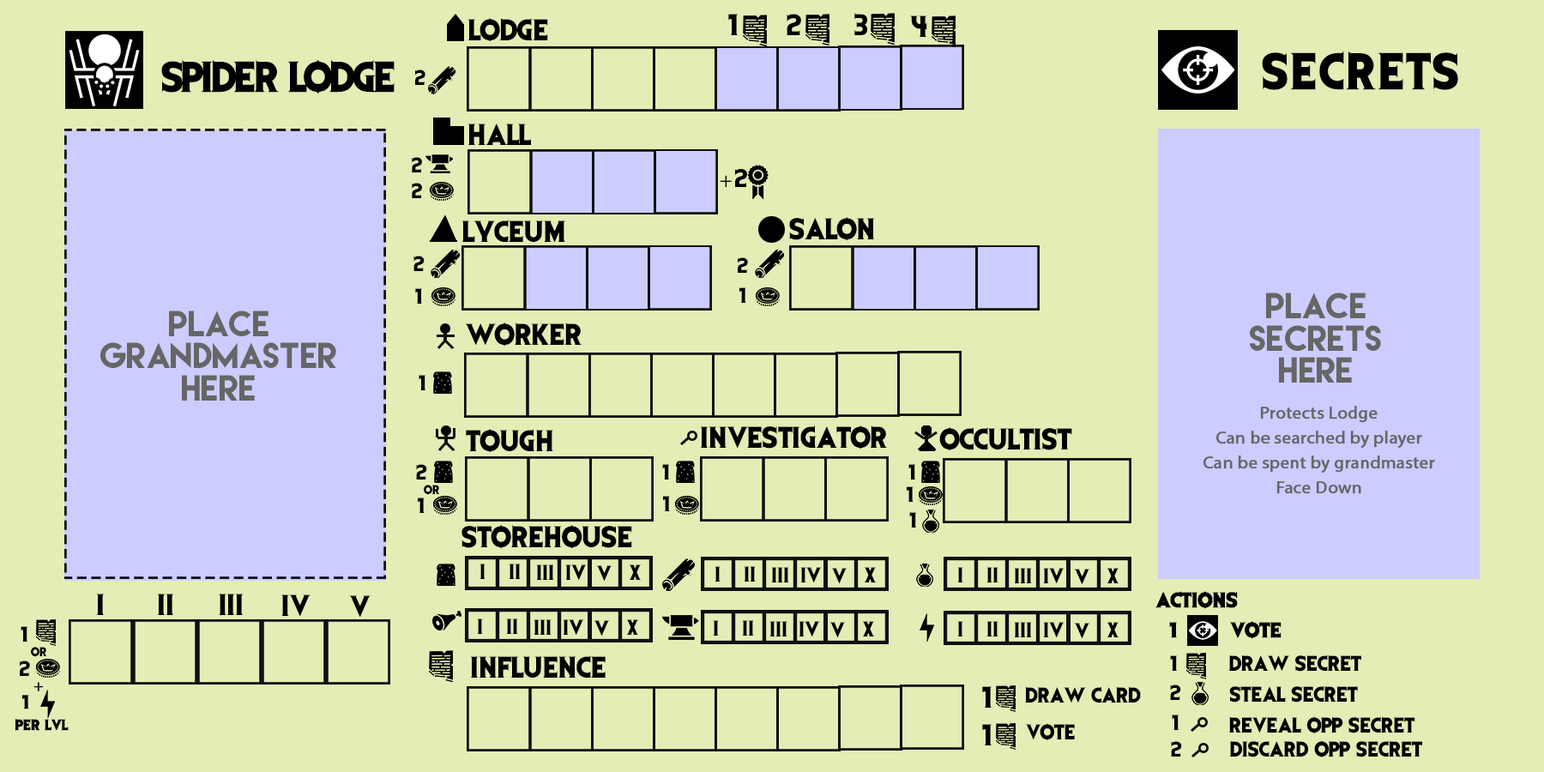
<style>
.page{position:relative;width:1544px;height:772px;background:#e3edb5}
.page>*{position:absolute;margin:0}
.t1{font:25px "EvilDead";color:#000000}
.t2{font:42.9px "EvilDead";letter-spacing:0.05em;color:#000000}
.t3{font:35.7px "EvilDead";letter-spacing:-0.05em;color:#000000}
.t4{font:17.9px "EvilDead";color:#000000}
.t5{font:10.3px/25px "MyriadPro-Regular";color:#000000}
.t6{font:10.3px/25px "EvilDead";color:#000000}
.t7{font:32.2px/32.2px "LemonMilk";color:#666666}
.t8{font:17.9px/25px "MyriadPro-Regular";color:#666666;font-weight:bold}
.t9{font:10.7px "EvilDead";color:#000000}
.t10{font:17.9px "EvilDead";letter-spacing:-0.05em;color:#000000}
.t11{font:17.9px "EvilDead";color:#000000;font-weight:bold}
.t12{font:16.1px "MyriadPro-Regular";color:#000000;font-weight:bold}
.t13{font:16.1px "EvilDead";color:#000000;font-weight:bold}
.t14{font:12.5px "EvilDead";color:#000000;font-weight:bold}
</style>
<div class="page">
<p class="t1" style="left:728px;top:14px;width:11px;height:21px">1</p>
<p class="t1" style="left:787px;top:14px;width:14px;height:21px">2</p>
<p class="t1" style="left:855px;top:13px;width:12px;height:22px">3</p>
<p class="t1" style="left:910px;top:15px;width:17px;height:22px">4</p>
<p class="t1" style="left:468px;top:18px;width:80px;height:24px">LODGE</p>
<p class="t2" style="left:1262px;top:51px;width:197px;height:39px">SECRETS</p>
<p class="t3" style="left:161px;top:59px;width:234px;height:35px">SPIDER LODGE</p>
<p class="t4" style="left:415px;top:69px;width:11px;height:16px">2</p>
<p class="t1" style="left:468px;top:124px;width:63px;height:21px">HALL</p>
<p class="t4" style="left:412px;top:157px;width:10px;height:15px">2</p>
<p class="t5" style="left:720px;top:169px;width:27px;height:18px">+<span class="t6">2</span></p>
<p class="t4" style="left:412px;top:183px;width:10px;height:15px">2</p>
<p class="t1" style="left:462px;top:220px;width:103px;height:22px">LYCEUM</p>
<p class="t1" style="left:789px;top:217px;width:86px;height:24px">SALON</p>
<p class="t4" style="left:414px;top:256px;width:11px;height:15px">2</p>
<p class="t4" style="left:738px;top:257px;width:10px;height:16px">2</p>
<p class="t4" style="left:415px;top:288px;width:7px;height:16px">1</p>
<p class="t4" style="left:740px;top:287px;width:6px;height:16px">1</p>
<p class="t7" style="left:1250px;top:293px;width:131px;height:90px;text-align:center">PLACE<br>SECRETS<br>HERE</p>
<p class="t7" style="left:100px;top:311px;width:236px;height:90px;text-align:center">PLACE<br>GRANDMASTER<br>HERE</p>
<p class="t1" style="left:465px;top:323px;width:118px;height:24px">WORKER</p>
<p class="t4" style="left:419px;top:375px;width:7px;height:15px">1</p>
<p class="t8" style="left:1203px;top:406px;width:232px;height:88px;text-align:center">Protects Lodge<br>Can be searched by player<br>Can be spent by grandmaster<br>Face Down</p>
<p class="t1" style="left:700px;top:426px;width:188px;height:24px">INVESTIGATOR</p>
<p class="t1" style="left:466px;top:429px;width:87px;height:24px">TOUGH</p>
<p class="t1" style="left:939px;top:427px;width:133px;height:24px">OCCULTIST</p>
<p class="t4" style="left:416px;top:464px;width:11px;height:16px">2</p>
<p class="t4" style="left:662px;top:464px;width:8px;height:16px">1</p>
<p class="t4" style="left:909px;top:464px;width:7px;height:16px">1</p>
<p class="t9" style="left:424px;top:484px;width:16px;height:11px">or</p>
<p class="t4" style="left:418px;top:498px;width:7px;height:15px">1</p>
<p class="t4" style="left:663px;top:496px;width:7px;height:15px">1</p>
<p class="t4" style="left:907px;top:486px;width:7px;height:16px">1</p>
<p class="t4" style="left:909px;top:512px;width:8px;height:16px">1</p>
<p class="t1" style="left:462px;top:525px;width:170px;height:24px">STOREHOUSE</p>
<p class="t4" style="left:480px;top:564px;width:6px;height:15px">I</p>
<p class="t4" style="left:509px;top:564px;width:12px;height:15px">II</p>
<p class="t4" style="left:536px;top:565px;width:18px;height:15px">III</p>
<p class="t4" style="left:565px;top:565px;width:22px;height:15px">IV</p>
<p class="t4" style="left:596px;top:565px;width:17px;height:16px">V</p>
<p class="t10" style="left:629px;top:565px;width:13px;height:15px">X</p>
<p class="t4" style="left:715px;top:566px;width:6px;height:16px">I</p>
<p class="t4" style="left:744px;top:566px;width:12px;height:16px">II</p>
<p class="t4" style="left:771px;top:567px;width:18px;height:16px">III</p>
<p class="t4" style="left:800px;top:567px;width:22px;height:16px">IV</p>
<p class="t4" style="left:831px;top:568px;width:17px;height:15px">V</p>
<p class="t10" style="left:864px;top:567px;width:13px;height:16px">X</p>
<p class="t4" style="left:957px;top:567px;width:6px;height:16px">I</p>
<p class="t4" style="left:987px;top:567px;width:12px;height:16px">II</p>
<p class="t4" style="left:1014px;top:568px;width:18px;height:15px">III</p>
<p class="t4" style="left:1043px;top:568px;width:22px;height:15px">IV</p>
<p class="t4" style="left:1074px;top:569px;width:16px;height:15px">V</p>
<p class="t10" style="left:1107px;top:568px;width:13px;height:15px">X</p>
<p class="t1" style="left:96px;top:594px;width:9px;height:21px">I</p>
<p class="t1" style="left:157px;top:594px;width:17px;height:21px">II</p>
<p class="t1" style="left:219px;top:594px;width:25px;height:21px">III</p>
<p class="t11" style="left:1156px;top:591px;width:82px;height:18px">ACTIONS</p>
<p class="t1" style="left:281px;top:595px;width:30px;height:21px">IV</p>
<p class="t1" style="left:349px;top:595px;width:22px;height:22px">V</p>
<p class="t4" style="left:21px;top:626px;width:7px;height:16px">1</p>
<p class="t4" style="left:477px;top:619px;width:6px;height:15px">I</p>
<p class="t4" style="left:506px;top:619px;width:12px;height:15px">II</p>
<p class="t4" style="left:534px;top:619px;width:18px;height:16px">III</p>
<p class="t4" style="left:563px;top:619px;width:21px;height:16px">IV</p>
<p class="t4" style="left:594px;top:620px;width:16px;height:16px">V</p>
<p class="t10" style="left:626px;top:619px;width:13px;height:16px">X</p>
<p class="t4" style="left:713px;top:620px;width:6px;height:16px">I</p>
<p class="t4" style="left:742px;top:620px;width:12px;height:16px">II</p>
<p class="t4" style="left:770px;top:621px;width:18px;height:16px">III</p>
<p class="t4" style="left:799px;top:621px;width:21px;height:16px">IV</p>
<p class="t4" style="left:830px;top:622px;width:16px;height:15px">V</p>
<p class="t10" style="left:862px;top:621px;width:13px;height:16px">X</p>
<p class="t4" style="left:957px;top:621px;width:6px;height:16px">I</p>
<p class="t4" style="left:987px;top:621px;width:12px;height:16px">II</p>
<p class="t4" style="left:1014px;top:622px;width:18px;height:15px">III</p>
<p class="t4" style="left:1043px;top:622px;width:22px;height:15px">IV</p>
<p class="t4" style="left:1074px;top:623px;width:16px;height:15px">V</p>
<p class="t10" style="left:1107px;top:622px;width:13px;height:15px">X</p>
<p class="t11" style="left:1169px;top:622px;width:8px;height:16px">1</p>
<p class="t11" style="left:1229px;top:621px;width:53px;height:18px">VOTE</p>
<p class="t9" style="left:31px;top:646px;width:16px;height:11px">or</p>
<p class="t4" style="left:20px;top:661px;width:10px;height:15px">2</p>
<p class="t1" style="left:470px;top:655px;width:136px;height:23px">INFLUENCE</p>
<p class="t4" style="left:1170px;top:655px;width:8px;height:16px">1</p>
<p class="t4" style="left:1229px;top:655px;width:133px;height:17px">DRAW SECRET</p>
<p class="t12" style="left:33px;top:682px;width:10px;height:10px">+</p>
<p class="t1" style="left:982px;top:686px;width:11px;height:22px">1</p>
<p class="t4" style="left:1025px;top:686px;width:116px;height:17px">DRAW CARD</p>
<p class="t4" style="left:1170px;top:685px;width:11px;height:15px">2</p>
<p class="t4" style="left:1229px;top:685px;width:129px;height:18px">STEAL SECRET</p>
<p class="t13" style="left:22px;top:695px;width:7px;height:15px">1</p>
<p class="t14" style="left:15px;top:719px;width:54px;height:12px">PER LVL</p>
<p class="t1" style="left:982px;top:724px;width:11px;height:22px">1</p>
<p class="t4" style="left:1025px;top:723px;width:50px;height:17px">VOTE</p>
<p class="t4" style="left:1172px;top:715px;width:8px;height:15px">1</p>
<p class="t4" style="left:1229px;top:716px;width:187px;height:18px">REVEAL OPP SECRET</p>
<p class="t4" style="left:1171px;top:741px;width:11px;height:16px">2</p>
<p class="t4" style="left:1229px;top:740px;width:193px;height:18px">DISCARD OPP SECRET</p>
</div>
